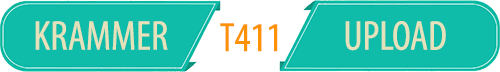
<style>
.page{position:relative;width:500px;height:72px;background:#0fbca9}
.page>*{position:absolute;margin:0}
.t1{font:42px "MyriadPro-Cond";color:#e5e1bb}
.t2{font:41.3px "MyriadPro-Cond";color:#ff9204}
</style>
<div class="page">
<p class="t1" style="left:35px;top:21px;width:133px;height:29px">KRAMMER</p>
<p class="t2" style="left:220px;top:23px;width:58px;height:29px">T411</p>
<p class="t1" style="left:345px;top:21px;width:101px;height:30px">UPLOAD</p>
</div>
